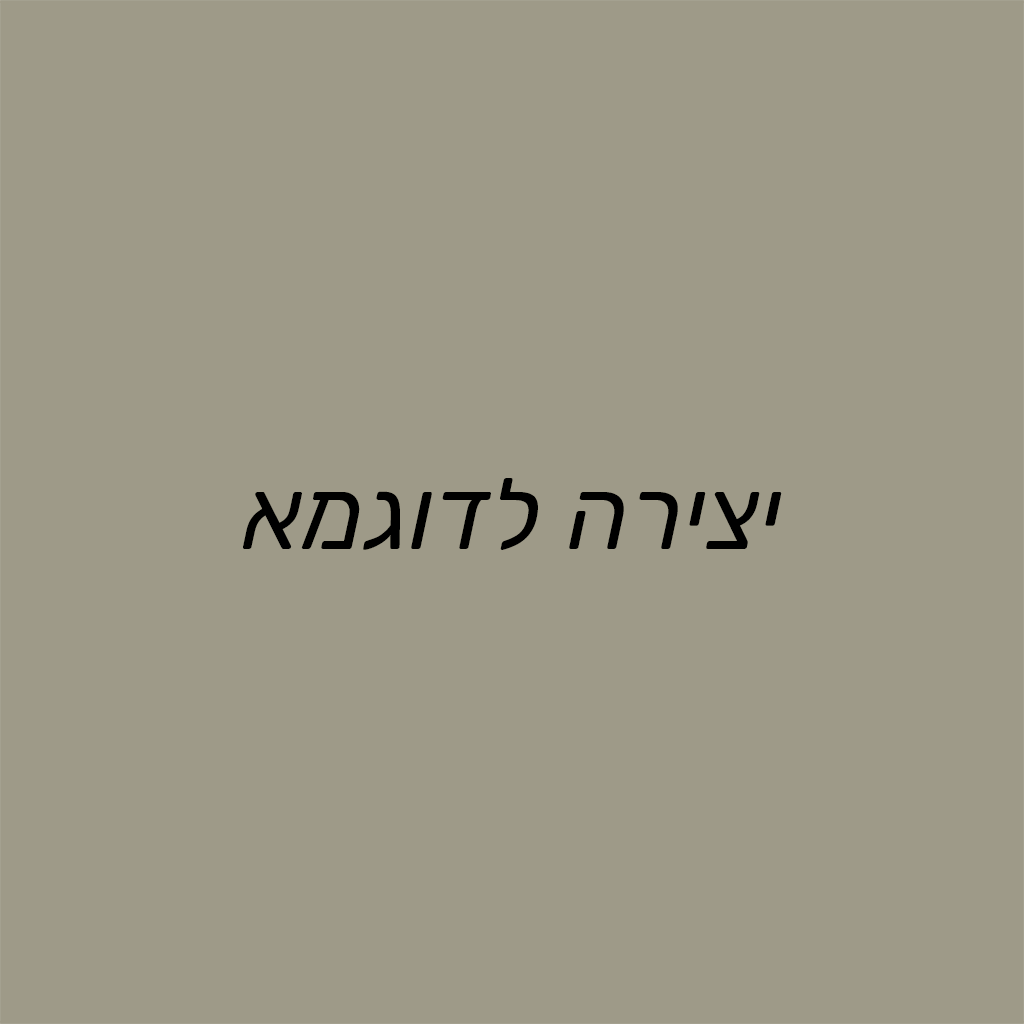
<style>
.page{position:relative;width:1024px;height:1024px;background:#9e9a88}
.page>*{position:absolute;margin:0}
.t1{font:100px "Rubik-Italic";color:#000000}
</style>
<div class="page">
<p class="t1" style="left:243px;top:478px;width:539px;height:72px">יצירה לדוגמא</p>
</div>
